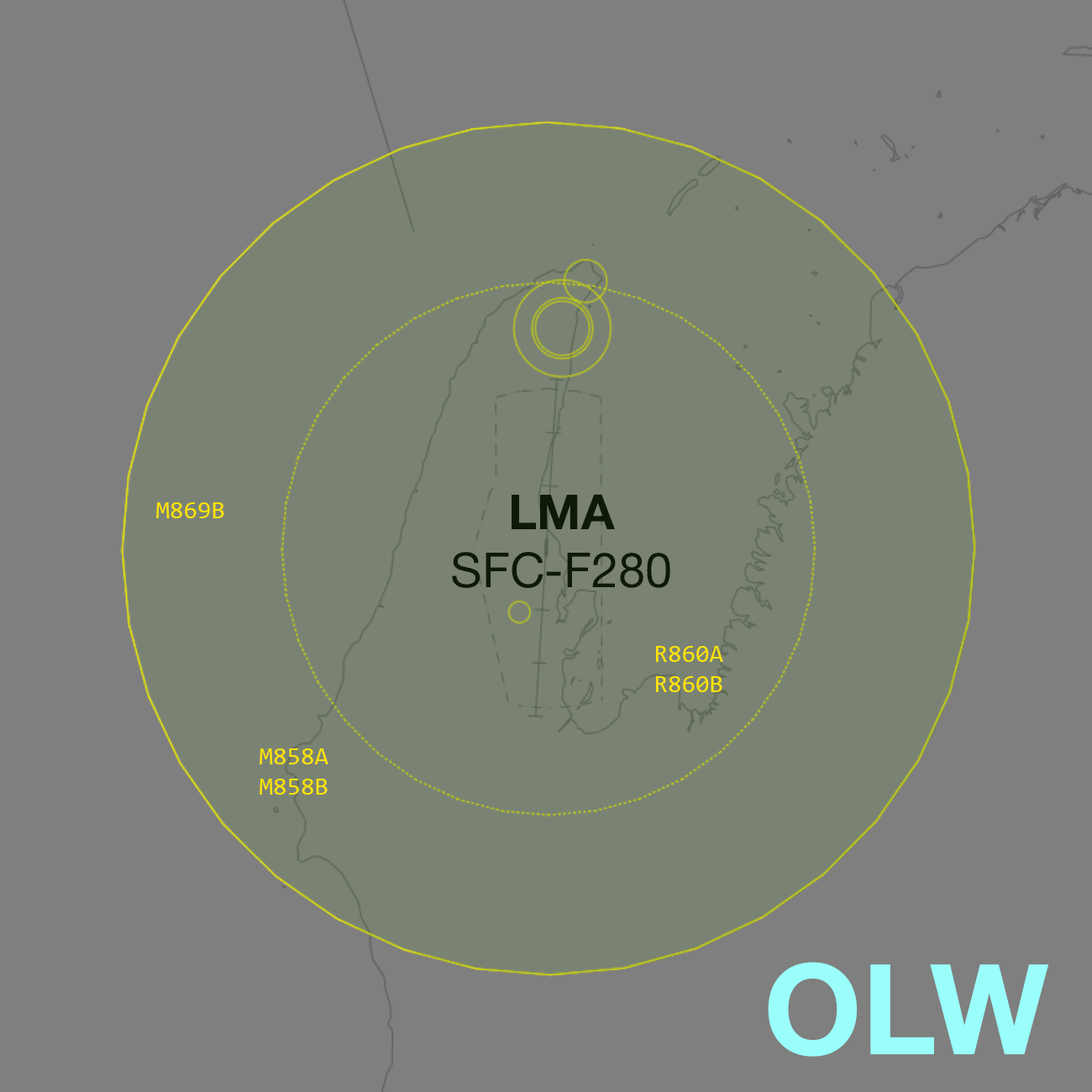
<style>
.page{position:relative;width:1092px;height:1092px;background:#7f7f7f}
.page>*{position:absolute;margin:0}
.t1{font:48.5px "HelveticaNeue-Roman";color:#0f1908}
.t2{font:48.5px "HelveticaNeue-Bold";color:#0f1908}
.t3{font:25.2px "Consolas";color:#ffe400}
.t4{font:126px "HelveticaNeue-Bold";color:#9afffb}
</style>
<div class="page">
<p class="t1" style="left:452px;top:494px;width:218px;height:94px;text-align:center"><span class="t2">LMA<br></span>SFC-F280</p>
<p class="t3" style="left:156px;top:502px;width:68px;height:16px">M869B</p>
<p class="t3" style="left:656px;top:646px;width:67px;height:46px;text-align:center">R860A<br>R860B</p>
<p class="t3" style="left:260px;top:748px;width:68px;height:47px;text-align:center">M858A<br>M858B</p>
<p class="t4" style="left:768px;top:962px;width:281px;height:95px">OLW</p>
</div>
